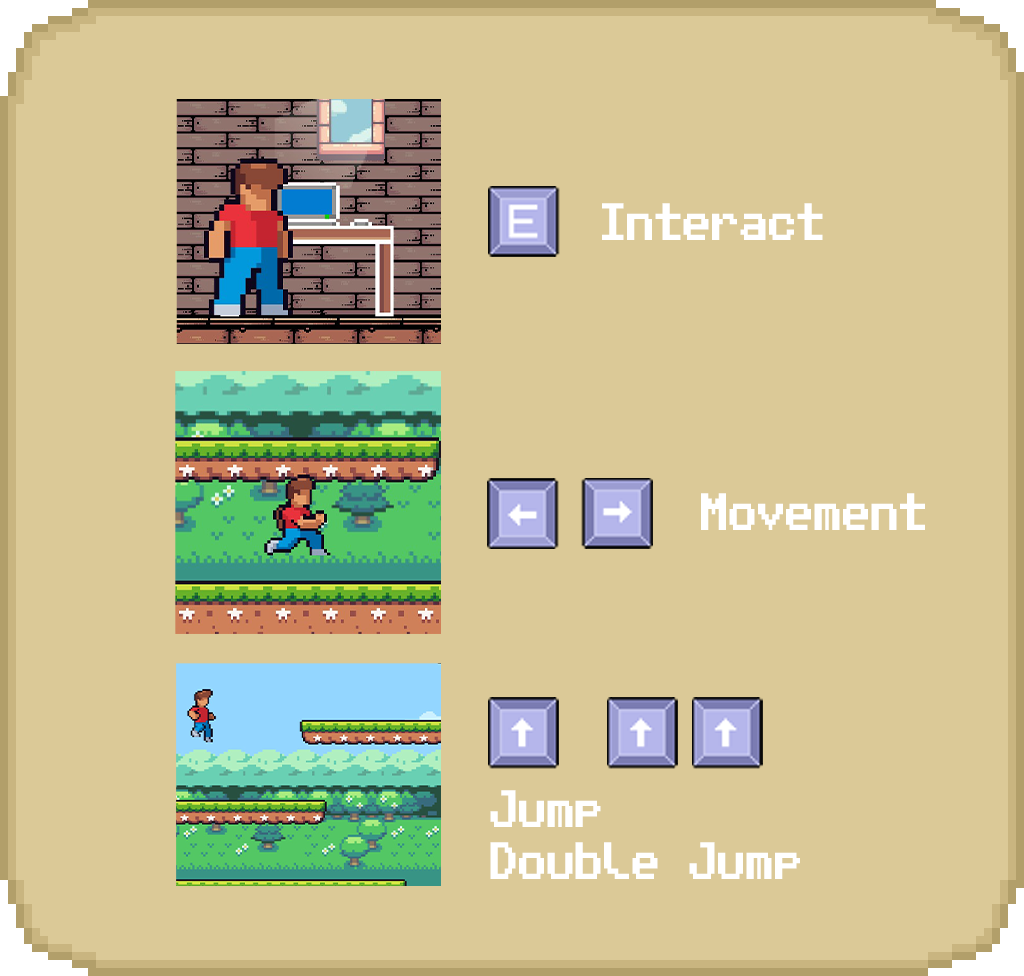
<style>
.page{position:relative;width:1024px;height:976px;background:#dbc997}
.page>*{position:absolute;margin:0}
.t1{font:42.1px "PublicPixel";color:#ffffff;scale:0.68 1}
.t2{font:42.1px/52px "PublicPixel";color:#ffffff;scale:0.68 1}
</style>
<div class="page">
<p class="t1" style="left:602px;top:203px;width:221px;height:37px">Interact</p>
<p class="t1" style="left:701px;top:493px;width:224px;height:37px">Movement</p>
<p class="t2" style="left:490px;top:790px;width:310px;height:89px">Jump<br>Double Jump</p>
</div>
